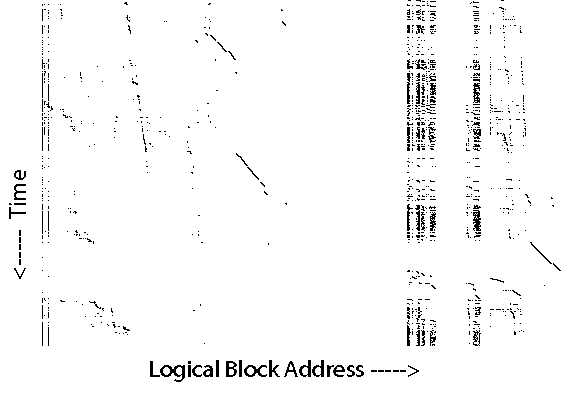
<style>
.page{position:relative;width:562px;height:396px;background:#ffffff}
.page>*{position:absolute;margin:0}
.t1{font:24px "MyriadPro-Regular";color:#000000}
</style>
<div class="page">
<p class="t1" style="left:9px;top:170px;width:17px;height:109px;rotate:-90deg">&lt;-----  Time</p>
<p class="t1" style="left:150px;top:360px;width:269px;height:22px">Logical Block Address -----&gt;</p>
</div>
